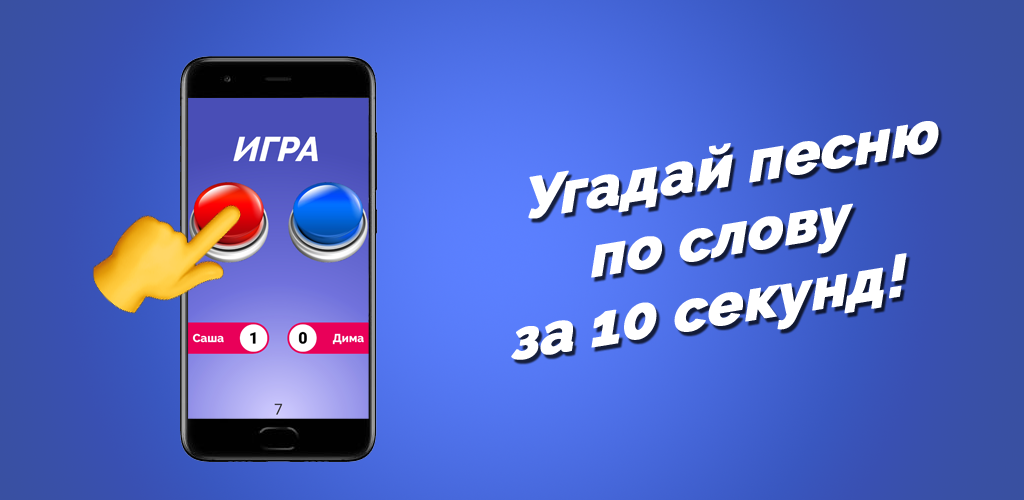
<style>
.page{position:relative;width:1024px;height:500px}
.page>*{position:absolute;margin:0}
.t1{font:60px "Raleway-ExtraBold";color:#ffffff;font-weight:bold}
</style>
<div class="page">
<p class="t1" style="left:511px;top:121px;width:428px;height:239px;text-align:center;rotate:-9deg">Угадай песню<br>по слову<br>за 10 секунд!</p>
</div>
